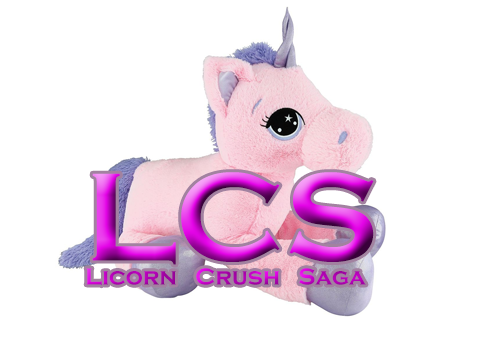
<style>
.page{position:relative;width:481px;height:339px;background:#ffffff}
.page>*{position:absolute;margin:0}
.t1{font:24px/12px "CopperplateGothic-Bold"}
.t2{font:130px/12px "CopperplateGothic-Bold"}
</style>
<div class="page">
<p class="t1" style="left:86px;top:172px;width:288px;height:114px"><span class="t2">LCS<br></span><br>Licorn   Crush   Saga</p>
</div>
